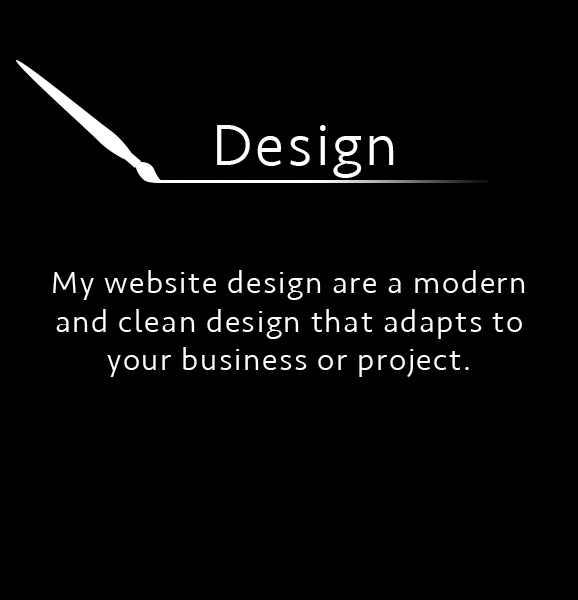
<style>
.page{position:relative;width:578px;height:600px;background:#000000}
.page>*{position:absolute;margin:0}
.t1{font:60px "Seravek-Light";letter-spacing:0.05em;color:#ffffff}
.t2{font:32px "Seravek-Light";letter-spacing:0.05em;color:#ffffff}
</style>
<div class="page">
<p class="t1" style="left:217px;top:125px;width:177px;height:53px">Design</p>
<p class="t2" style="left:53px;top:270px;width:472px;height:107px;text-align:center">My website design are a modern and clean design that adapts to your business or project.</p>
</div>
